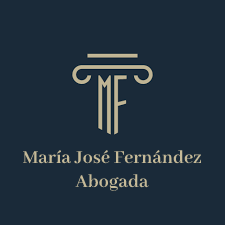
<style>
.page{position:relative;width:225px;height:225px;background:#1a2a39}
.page>*{position:absolute;margin:0}
.t1{font:20px "AbhayaLibre-Bold";color:#c6ba98}
</style>
<div class="page">
<p class="t1" style="left:22px;top:150px;width:179px;height:41px;text-align:center">María José Fernández<br>Abogada</p>
</div>
